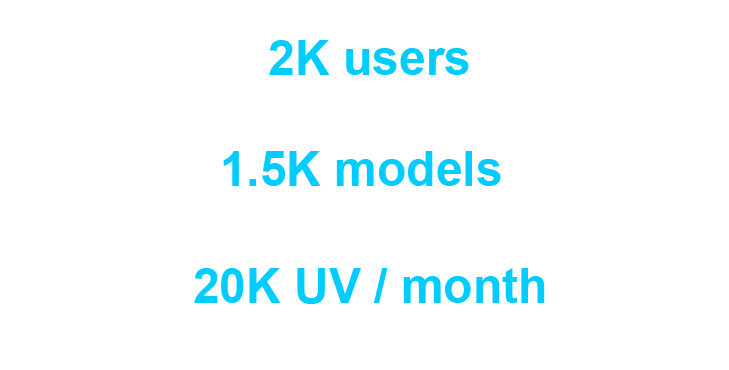
<style>
.page{position:relative;width:729px;height:370px;background:#ffffff}
.page>*{position:absolute;margin:0}
.t1{font:48px "Arial-BoldMT";color:#00ccff}
</style>
<div class="page">
<p class="t1" style="left:269px;top:40px;width:200px;height:35px">2K users</p>
<p class="t1" style="left:223px;top:151px;width:278px;height:35px">1.5K models</p>
<p class="t1" style="left:194px;top:268px;width:351px;height:36px">20K UV / month</p>
</div>
